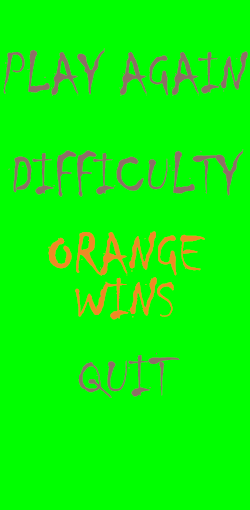
<style>
.page{position:relative;width:250px;height:510px;background:#00ff00}
.page>*{position:absolute;margin:0}
.t1{font:58.3px "Chiller-Regular";color:#8e6f67}
.t2{font:58.3px "Chiller-Regular";color:#ef8a26}
</style>
<div class="page">
<p class="t1" style="left:3px;top:48px;width:245px;height:48px">PLAY AGAIN</p>
<p class="t1" style="left:8px;top:149px;width:236px;height:48px">DIFFICULTY</p>
<p class="t2" style="left:48px;top:231px;width:157px;height:89px">ORANGE WINS</p>
<p class="t1" style="left:78px;top:352px;width:102px;height:46px">QUIT</p>
</div>
